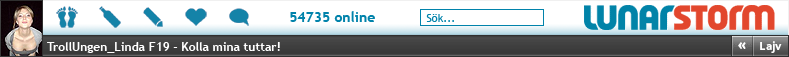
<style>
.page{position:relative;width:789px;height:57px;background:#ffffff}
.page>*{position:absolute;margin:0}
.t1{font:14px "TrebuchetMS-Bold";color:#0183ab}
.t2{font:11px "TrebuchetMS";color:#0183ab}
.t3{font:12px "TrebuchetMS-Bold";color:#ffffff}
</style>
<div class="page">
<p class="t1" style="left:290px;top:11px;width:85px;height:11px">54735 online</p>
<p class="t2" style="left:426px;top:14px;width:28px;height:8px">Sök...</p>
<p class="t3" style="left:47px;top:42px;width:233px;height:11px">TrollUngen_Linda F19 - Kolla mina tuttar!</p>
</div>
